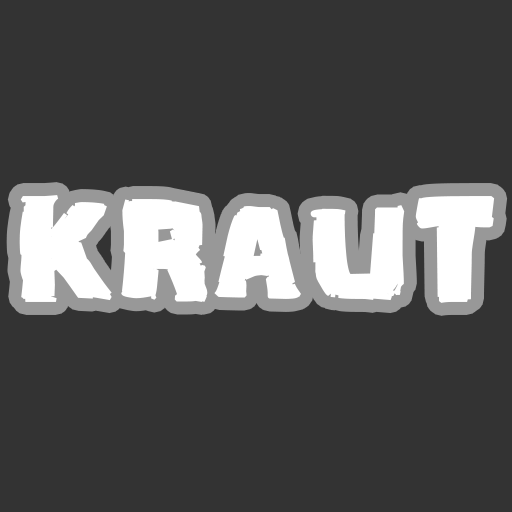
<style>
.page{position:relative;width:512px;height:512px;background:#333333}
.page>*{position:absolute;margin:0}
.t1{font:140px "ARDARLING";color:#ffffff;font-weight:bold}
</style>
<div class="page">
<p class="t1" style="left:19px;top:195px;width:476px;height:108px">KRAUT</p>
</div>
